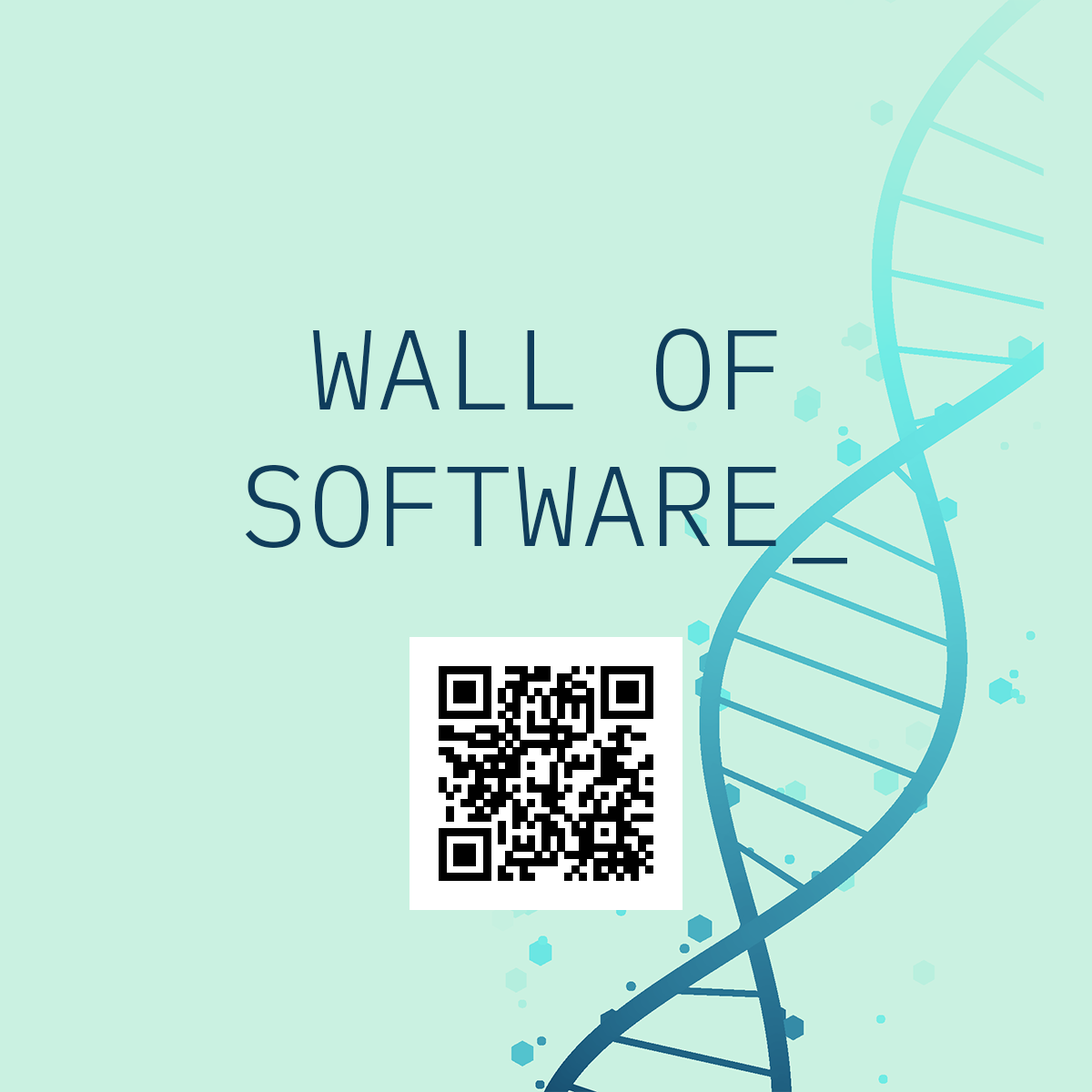
<style>
.page{position:relative;width:1092px;height:1092px;background:#caf1e1}
.page>*{position:absolute;margin:0}
.t1{font:113.7px "IBMPlexMono-Light";color:#0f3d5c}
</style>
<div class="page">
<p class="t1" style="left:245px;top:329px;width:602px;height:235px;text-align:center">WALL OF<br>SOFTWARE_</p>
</div>
